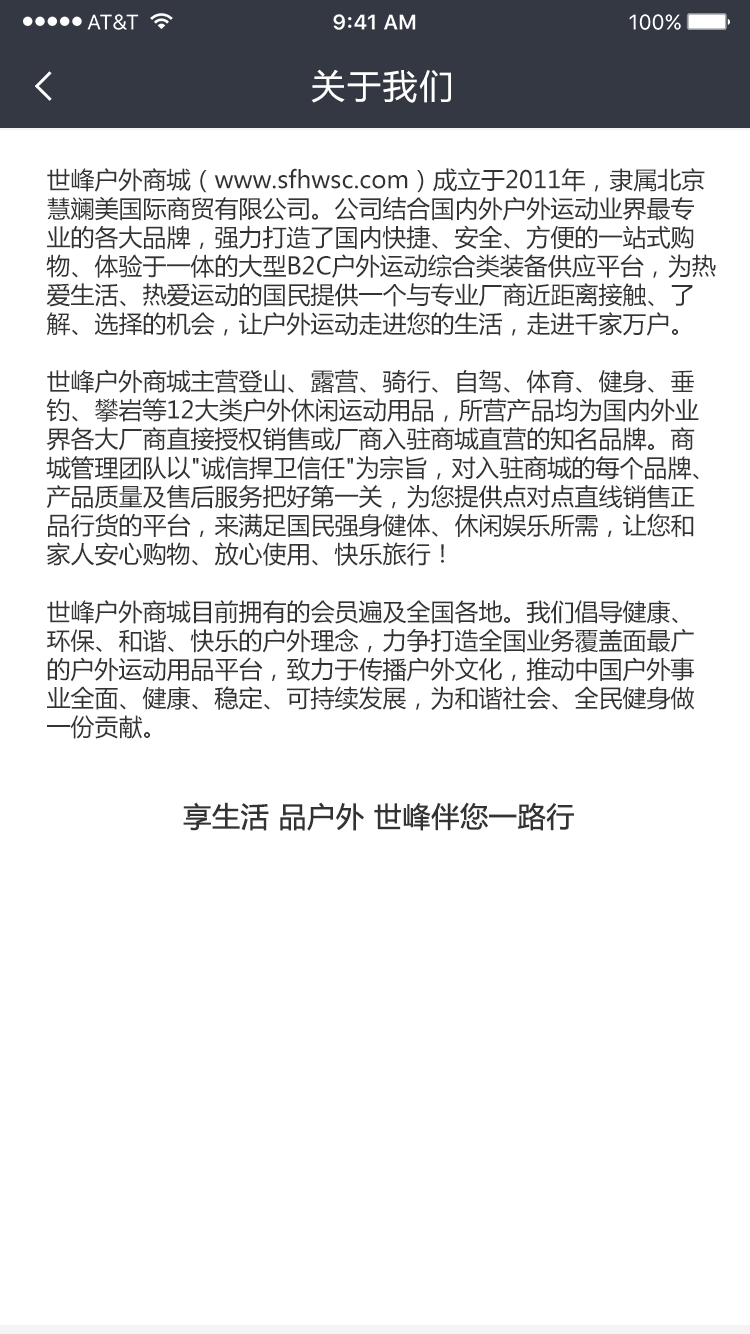
<style>
.page{position:relative;width:750px;height:1334px;background:#ffffff}
.page>*{position:absolute;margin:0}
.t1{font:34px "MicrosoftYaHei";letter-spacing:0.06em;color:#ffffff}
.t2{font:24px "MicrosoftYaHei";color:#333333}
.t3{font:28px "MicrosoftYaHei";color:#333333;font-weight:bold}
</style>
<div class="page">
<p class="t1" style="left:311px;top:69px;width:140px;height:34px">关于我们</p>
<p class="t2" style="left:46px;top:168px;width:670px;height:571px">世峰户外商城（www.sfhwsc.com）成立于2011年，隶属北京慧斓美国际商贸有限公司。公司结合国内外户外运动业界最专业的各大品牌，强力打造了国内快捷、安全、方便的一站式购物、体验于一体的大型B2C户外运动综合类装备供应平台，为热爱生活、热爱运动的国民提供一个与专业厂商近距离接触、了解、选择的机会，让户外运动走进您的生活，走进千家万户。<br><br>世峰户外商城主营登山、露营、骑行、自驾、体育、健身、垂钓、攀岩等12大类户外休闲运动用品，所营产品均为国内外业界各大厂商直接授权销售或厂商入驻商城直营的知名品牌。商城管理团队以"诚信捍卫信任"为宗旨，对入驻商城的每个品牌、产品质量及售后服务把好第一关，为您提供点对点直线销售正品行货的平台，来满足国民强身健体、休闲娱乐所需，让您和家人安心购物、放心使用、快乐旅行！<br><br>世峰户外商城目前拥有的会员遍及全国各地。我们倡导健康、环保、和谐、快乐的户外理念，力争打造全国业务覆盖面最广的户外运动用品平台，致力于传播户外文化，推动中国户外事业全面、健康、稳定、可持续发展，为和谐社会、全民健身做一份贡献。</p>
<p class="t3" style="left:183px;top:802px;width:391px;height:29px">享生活 品户外 世峰伴您一路行</p>
</div>
